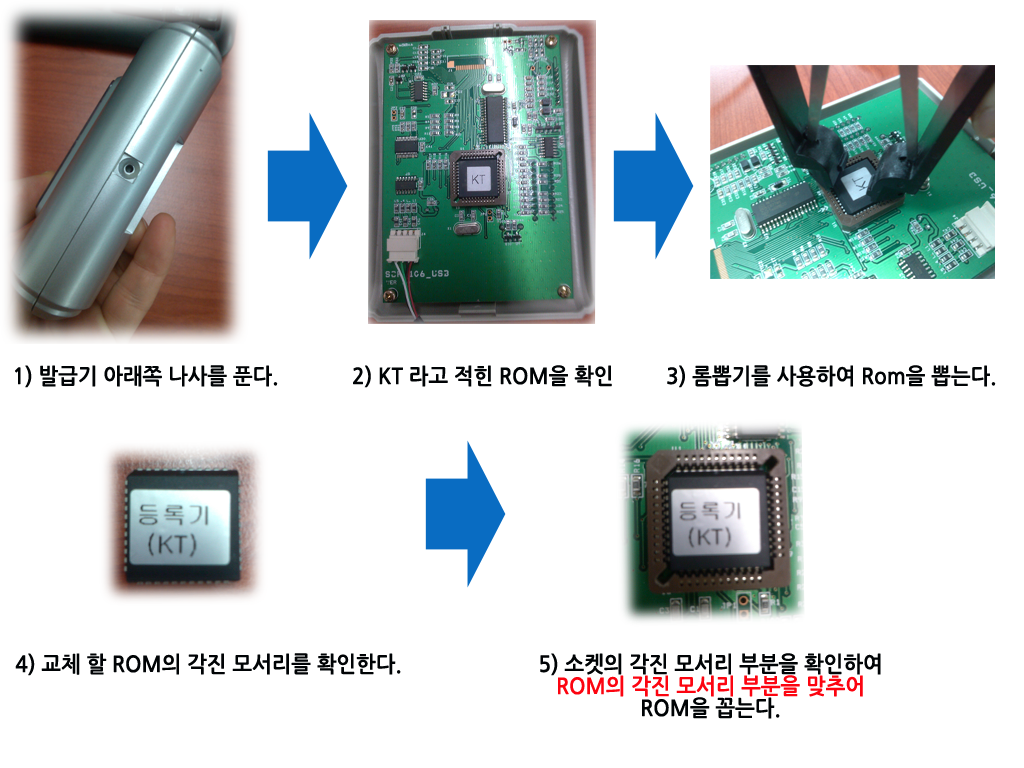
<style>
.page{position:relative;width:1024px;height:768px;background:#ffffff}
.page>*{position:absolute;margin:0}
.t1{font:22px "NanumGothicBold";color:#000305;scale:0.95 1}
.t2{font:22px/22px "NanumGothicBold";color:#000305;scale:0.95 1}
.t3{font:22px/22px "NanumGothicBold";color:#fc0410;scale:0.95 1}
</style>
<div class="page">
<p class="t1" style="left:15px;top:365px;width:263px;height:23px">1) 발급기 아래쪽 나사를 푼다.</p>
<p class="t1" style="left:353px;top:365px;width:259px;height:23px">2) KT 라고 적힌 ROM을 확인</p>
<p class="t1" style="left:667px;top:365px;width:329px;height:23px">3) 롬뽑기를 사용하여 Rom을 뽑는다.</p>
<p class="t1" style="left:15px;top:653px;width:386px;height:23px">4) 교체 할 ROM의 각진 모서리를 확인한다.</p>
<p class="t2" style="left:540px;top:653px;width:341px;height:66px;text-align:center">5) 소켓의 각진 모서리 부분을 확인하여<br><span class="t3">ROM의 각진 모서리 부분을 맞추어<br></span>ROM을 꼽는다.</p>
</div>
